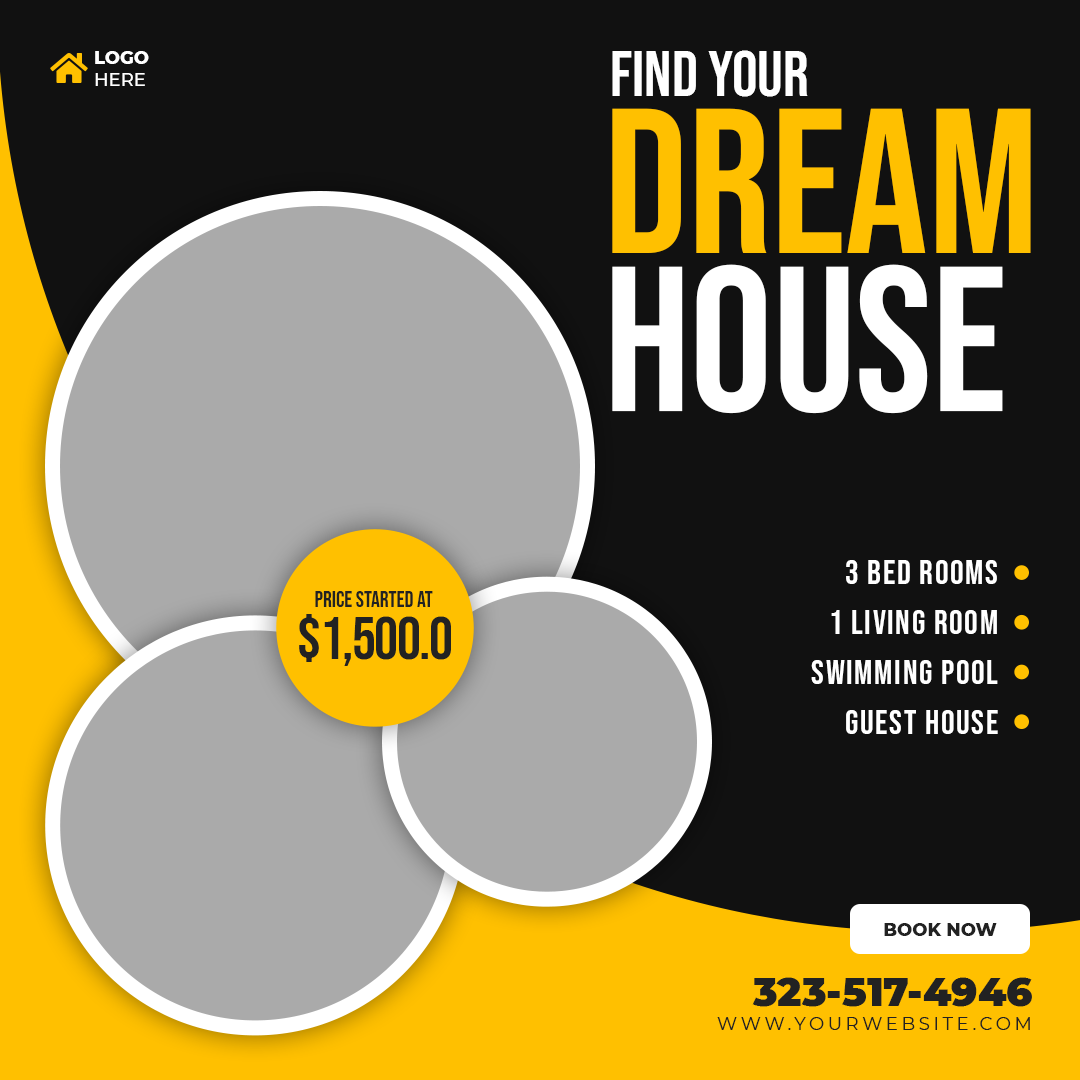
<style>
.page{position:relative;width:1080px;height:1080px;background:#111111}
.page>*{position:absolute;margin:0}
.t1{font:18px "Montserrat-ExtraBold";color:#ffffff;text-transform:uppercase}
.t2{font:18px "Montserrat-Medium";color:#ffffff;text-transform:uppercase}
.t3{font:64px "BebasNeue-Regular";color:#ffffff;text-transform:uppercase}
.t4{font:206px "BebasNeue-Regular";color:#ffc000;text-transform:uppercase}
.t5{font:206px "BebasNeue-Regular";color:#ffffff;text-transform:uppercase}
.t6{font:34px/50px "BebasNeue-Regular";letter-spacing:0.05em;color:#ffffff;text-transform:uppercase}
.t7{font:22px "BebasNeue-Regular";color:#222222}
.t8{font:60px "BebasNeue-Regular";letter-spacing:-0.025em;color:#222222}
.t9{font:18px "Montserrat-ExtraBold";color:#222222;text-transform:uppercase}
.t10{font:40px "Montserrat-Black";color:#222222}
.t11{font:18px "Montserrat-Regular";letter-spacing:0.2em;color:#222222;text-transform:uppercase}
</style>
<div class="page">
<p class="t1" style="left:95px;top:51px;width:54px;height:35px">Logo<br><span class="t2">Here</span></p>
<p class="t3" style="left:612px;top:50px;width:196px;height:47px">Find Your</p>
<p class="t4" style="left:612px;top:108px;width:419px;height:145px">Dream</p>
<p class="t5" style="left:612px;top:264px;width:391px;height:150px">House</p>
<p class="t6" style="left:811px;top:560px;width:187px;height:174px;text-align:right">3 Bed Rooms<br>1 Living Room<br>Swimming Pool<br>Guest House</p>
<p class="t7" style="left:315px;top:591px;width:118px;height:16px">Price Started At</p>
<p class="t8" style="left:299px;top:614px;width:152px;height:52px">$1,500.0</p>
<p class="t9" style="left:884px;top:923px;width:113px;height:13px">Book Now</p>
<p class="t10" style="left:752px;top:977px;width:280px;height:30px">323-517-4946</p>
<p class="t11" style="left:717px;top:1017px;width:313px;height:13px">www.yourwebsite.com</p>
</div>
